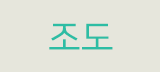
<style>
.page{position:relative;width:160px;height:72px;background:#e6e6dc}
.page>*{position:absolute;margin:0}
.t1{font:36px "NanumSquareR";color:#2dbda4}
</style>
<div class="page">
<p class="t1" style="left:49px;top:23px;width:64px;height:27px">조도</p>
</div>
